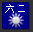
<style>
.page{position:relative;width:33px;height:32px;background:#000090}
.page>*{position:absolute;margin:0}
.t1{font:10.4px "SimSun";color:#ffffff}
</style>
<div class="page">
<p class="t1" style="left:5px;top:4px;width:20px;height:9px">六二</p>
</div>
